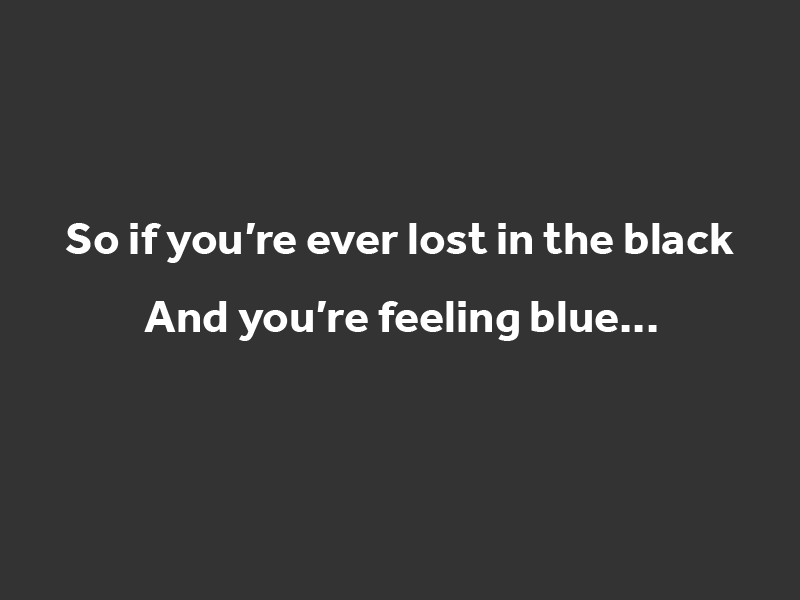
<style>
.page{position:relative;width:800px;height:600px;background:#333333}
.page>*{position:absolute;margin:0}
.t1{font:47.1px "Effra-Bold";color:#ffffff}
</style>
<div class="page">
<p class="t1" style="left:66px;top:223px;width:668px;height:40px">So if you’re ever lost in the black</p>
<p class="t1" style="left:144px;top:301px;width:513px;height:40px">And you’re feeling blue...</p>
</div>
